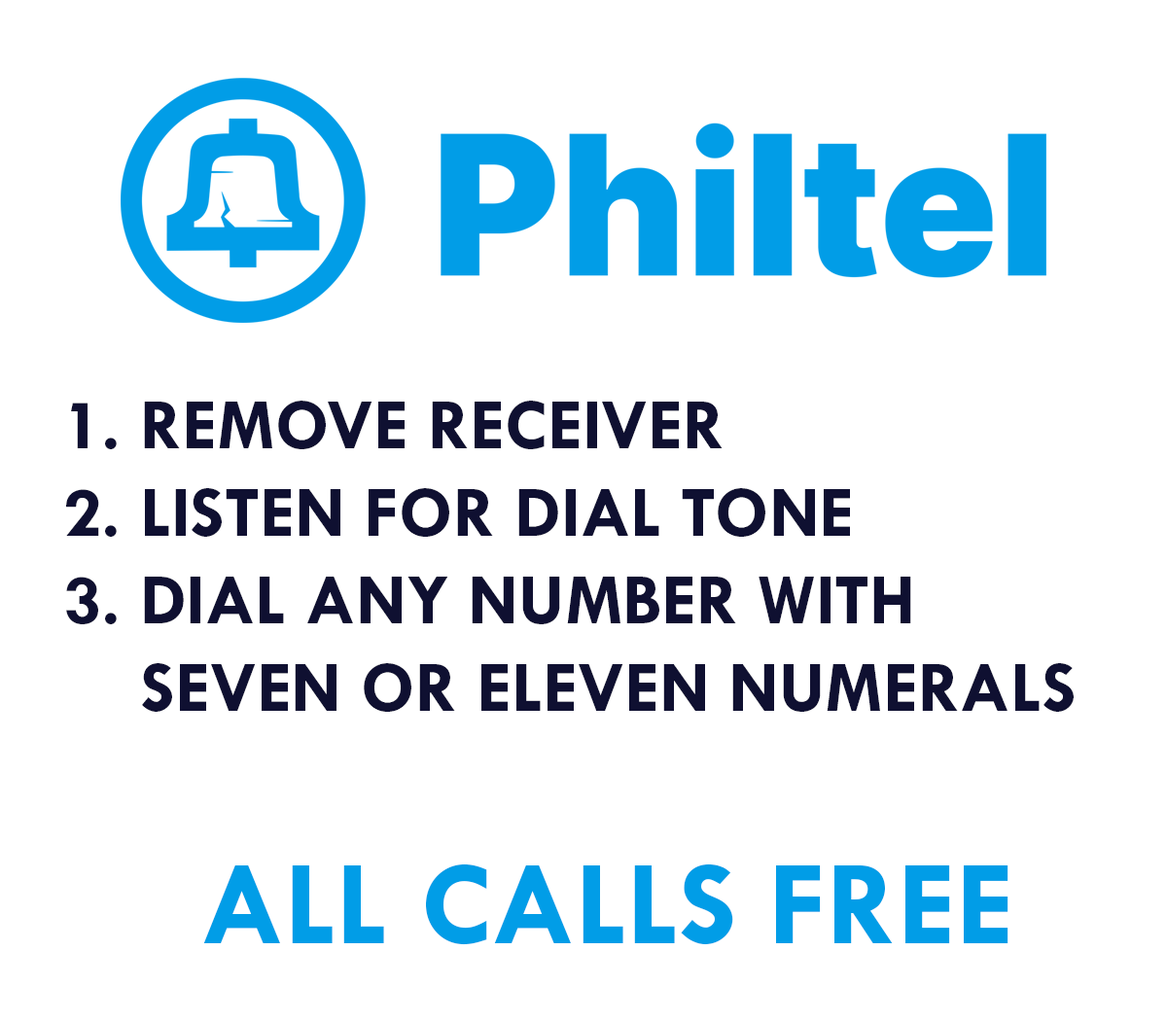
<style>
.page{position:relative;width:1167px;height:1021px;background:#ffffff}
.page>*{position:absolute;margin:0}
.t1{font:73px "TwCenMTStd-Bold";color:#0f1031}
.t2{font:121.6px "TwCenMTStd-Bold";color:#019de7}
</style>
<div class="page">
<p class="t1" style="left:66px;top:401px;width:1008px;height:311px">1. REMOVE RECEIVER<br>2. LISTEN FOR DIAL TONE<br>3. DIAL ANY NUMBER WITH<br>    SEVEN OR ELEVEN NUMERALS</p>
<p class="t2" style="left:203px;top:864px;width:806px;height:82px">ALL CALLS FREE</p>
</div>
